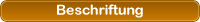
<style>
.page{position:relative;width:200px;height:22px}
.page>*{position:absolute;margin:0}
.t1{font:14px "ArialRoundedMTBold";color:#ffffff}
</style>
<div class="page">
<p class="t1" style="left:57px;top:4px;width:86px;height:14px">Beschriftung</p>
</div>
